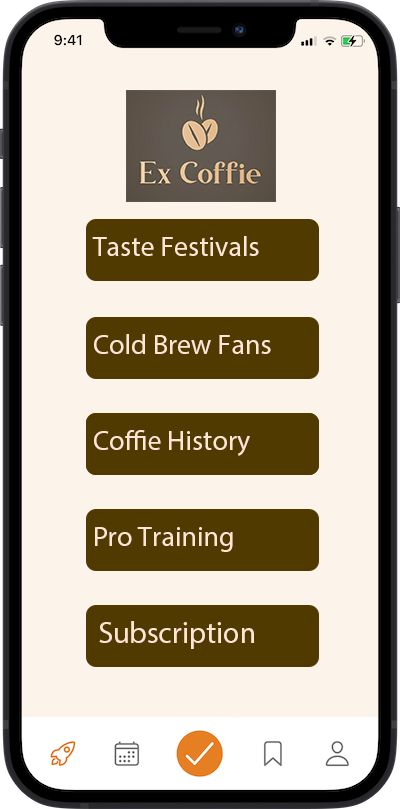
<style>
.page{position:relative;width:400px;height:809px;background:#fcf3ea}
.page>*{position:absolute;margin:0}
.t1{font:28px "MyriadPro-Regular";color:#ffe6d6}
.t2{font:30px "MyriadPro-Regular";color:#ffe6d6}
</style>
<div class="page">
<p class="t1" style="left:92px;top:236px;width:167px;height:20px">Taste Festivals</p>
<p class="t1" style="left:94px;top:334px;width:177px;height:20px">Cold Brew Fans</p>
<p class="t1" style="left:94px;top:430px;width:156px;height:26px">Coffie History</p>
<p class="t1" style="left:95px;top:527px;width:138px;height:25px">Pro Training</p>
<p class="t2" style="left:99px;top:621px;width:155px;height:28px">Subscription</p>
</div>
